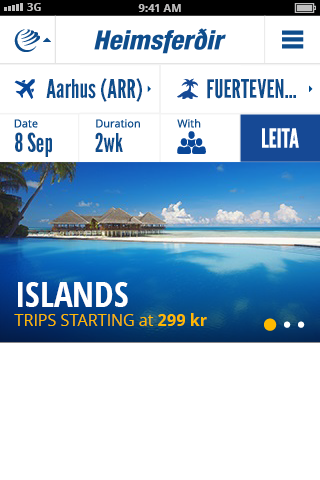
<style>
.page{position:relative;width:320px;height:480px;background:#ffffff}
.page>*{position:absolute;margin:0}
.t1{font:11px "OpenSans-Bold";color:#bfbebe}
.t2{font:26px "LeagueGothic-Regular";color:#0e4d8c}
.t3{font:26px "LeagueGothic-Regular";color:#0e4d8c;text-transform:uppercase}
.t4{font:35px "OpenSans-CondensedBold";color:#ffffff;text-transform:uppercase}
.t5{font:16px "OpenSans";color:#ffb900;text-transform:uppercase}
.t6{font:16px "OpenSans";color:#ffb900}
.t7{font:16px "OpenSans-Bold";color:#ffb900;text-transform:uppercase}
.t8{font:16px "OpenSans-Bold";color:#ffb900}
</style>
<div class="page">
<p class="t1" style="left:27px;top:3px;width:14px;height:8px">3G</p>
<p class="t1" style="left:138px;top:4px;width:43px;height:8px">9:41 AM</p>
<p class="t2" style="left:46px;top:78px;width:96px;height:24px">Aarhus (ARR)</p>
<p class="t3" style="left:207px;top:79px;width:89px;height:20px">Fuerteven...</p>
<p class="t2" style="left:15px;top:132px;width:37px;height:25px">8 Sep</p>
<p class="t2" style="left:95px;top:132px;width:28px;height:20px">2wk</p>
<p class="t4" style="left:18px;top:282px;width:110px;height:25px">iSLANDS</p>
<p class="t4" style="left:18px;top:282px;width:110px;height:25px">iSLANDS</p>
<p class="t5" style="left:14px;top:313px;width:193px;height:13px">Trips Starting <span class="t6">at </span><span class="t7">299 </span><span class="t8">kr</span></p>
<p class="t5" style="left:14px;top:313px;width:193px;height:13px">Trips Starting <span class="t6">at </span><span class="t7">299 </span><span class="t8">kr</span></p>
</div>
